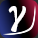
<style>
.page{position:relative;width:38px;height:38px}
.page>*{position:absolute;margin:0}
.t1{font:35.8px "Minion3Caption-BoldItalic";color:#ffffff}
</style>
<div class="page">
<p class="t1" style="left:8px;top:6px;width:18px;height:26px">γ</p>
</div>
